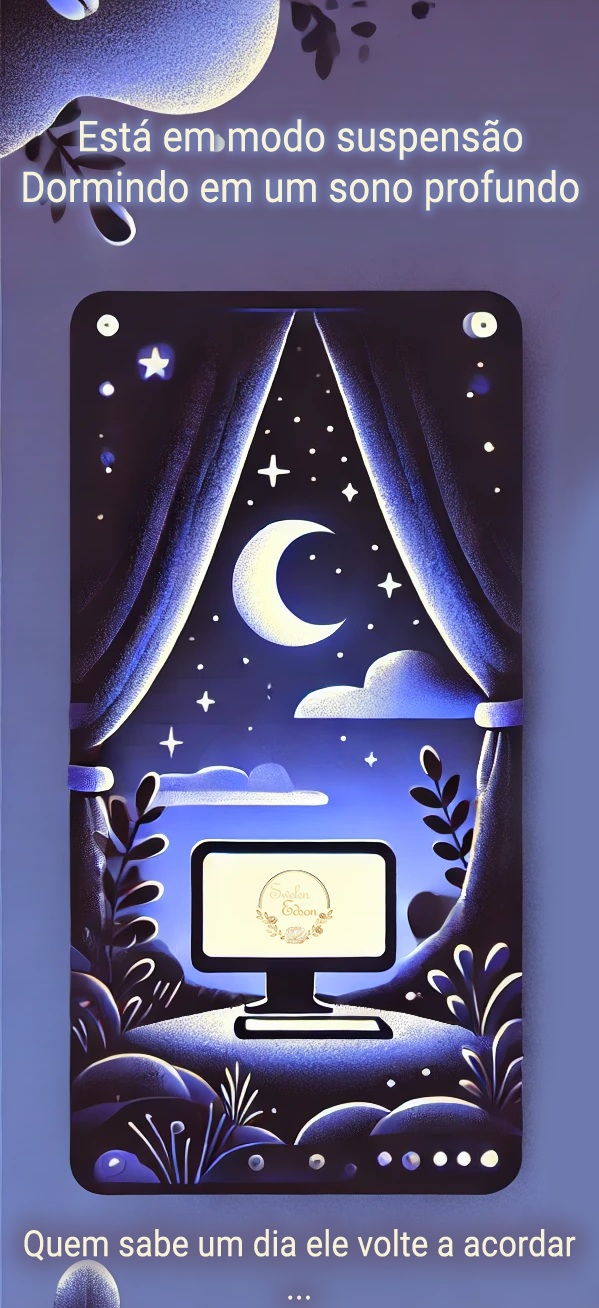
<style>
.page{position:relative;width:599px;height:1308px}
.page>*{position:absolute;margin:0}
.t1{font:42.2px "Roboto-Regular";letter-spacing:0.01em;color:#f7f3d8;scale:0.9 1}
.t2{font:36px "Roboto-Regular";letter-spacing:0.01em;color:#f7f3d8;scale:0.9 1}
</style>
<div class="page">
<p class="t1" style="left:23px;top:119px;width:556px;height:92px;text-align:center">Está em modo suspensão<br>Dormindo em um sono profundo</p>
<p class="t2" style="left:24px;top:1229px;width:552px;height:71px;text-align:center">Quem sabe um dia ele volte a acordar<br>...</p>
</div>
